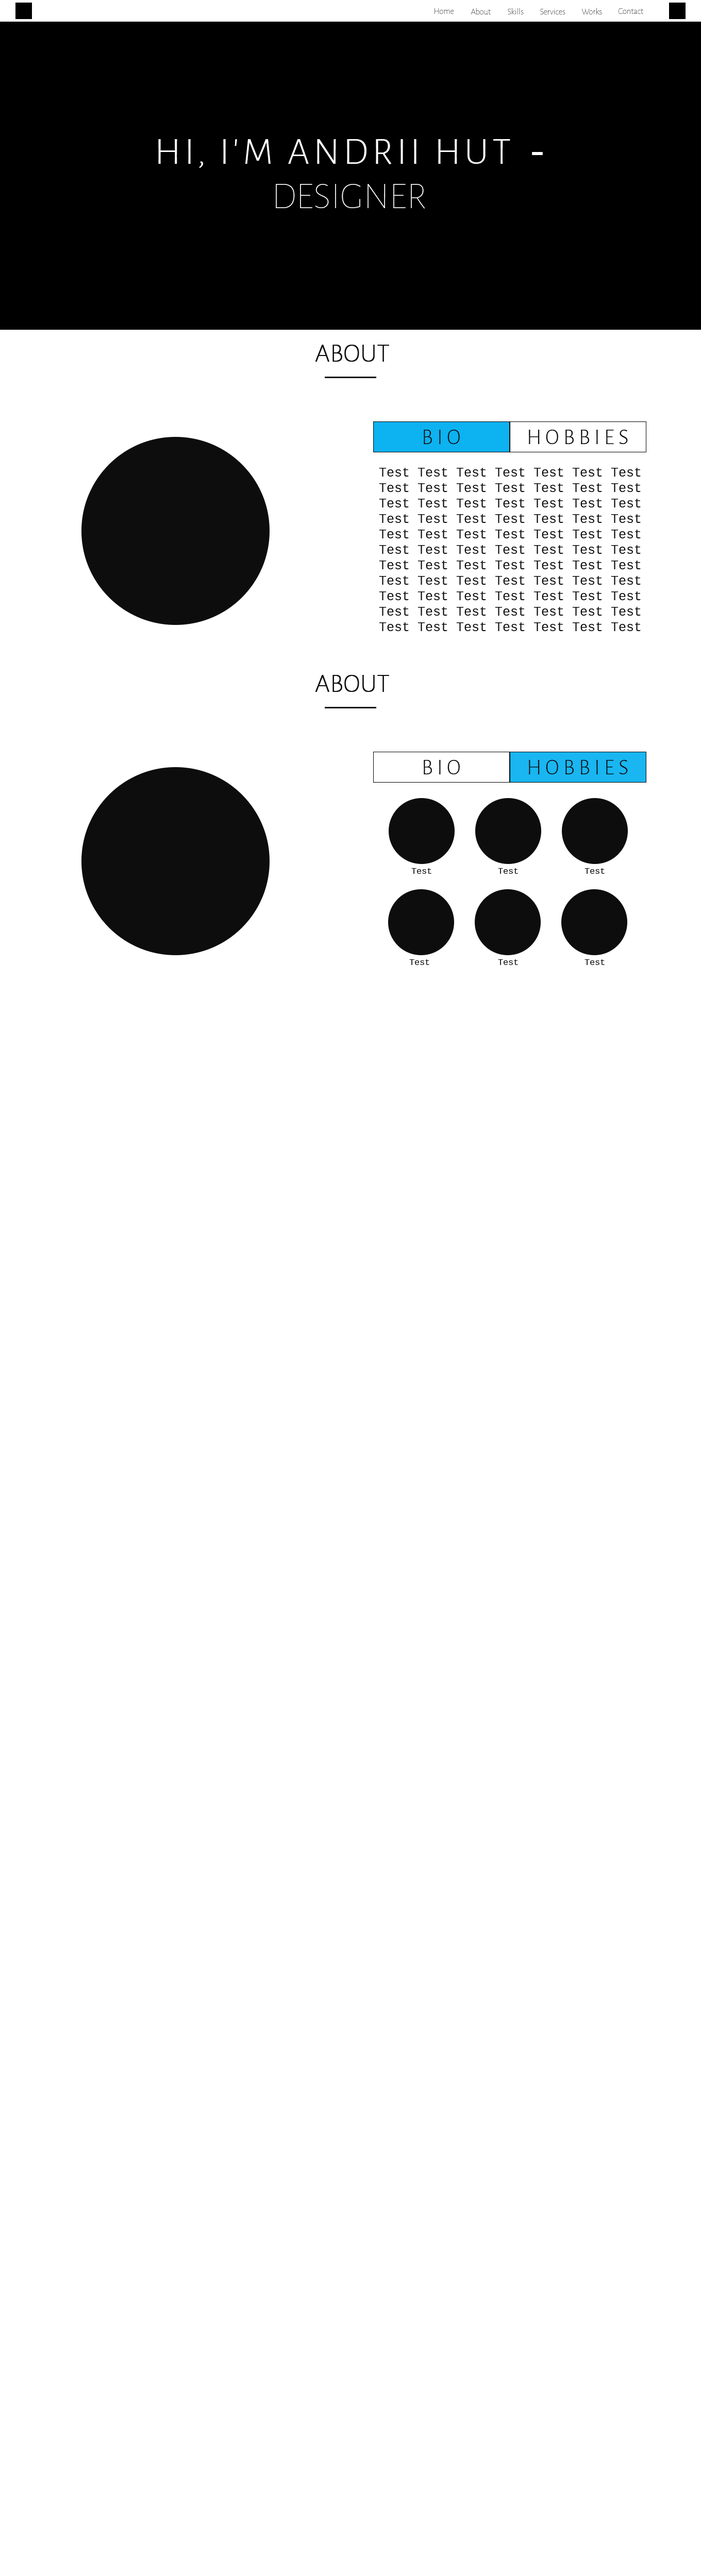
<style>
.page{position:relative;width:701px;height:2576px;background:#ffffff}
.page>*{position:absolute;margin:0}
.t1{font:8.6px "AlegreyaSans-Thin";color:#000000}
.t2{font:8.6px "AlegreyaSans-Thin"}
.t3{font:38.6px "AlegreyaSans-Light";letter-spacing:0.1em;color:#fffefe;text-transform:uppercase}
.t4{font:38.6px "Cousine";letter-spacing:0.1em;color:#fffefe;text-transform:uppercase}
.t5{font:38.6px "AlegreyaSans-Thin";color:#ffffff;text-transform:uppercase}
.t6{font:25.8px "AlegreyaSans-Thin";color:#010000;text-transform:uppercase;font-weight:bold}
.t7{font:21.5px "AlegreyaSans-Light";letter-spacing:0.2em;color:#000000}
.t8{font:12.9px "Cousine";color:#000000}
.t9{font:8.6px "Cousine";color:#000000}
</style>
<div class="page">
<p class="t1" style="left:434px;top:8px;width:20px;height:6px">Home</p>
<p class="t2" style="left:470px;top:8px;width:20px;height:6px">About</p>
<p class="t2" style="left:507px;top:8px;width:16px;height:6px">Skills</p>
<p class="t2" style="left:540px;top:9px;width:25px;height:5px">Services</p>
<p class="t1" style="left:581px;top:8px;width:21px;height:6px">Works</p>
<p class="t2" style="left:618px;top:8px;width:25px;height:6px">Contact</p>
<p class="t3" style="left:158px;top:139px;width:385px;height:29px">Hi, I'm Andrii Hut <span class="t4">-</span></p>
<p class="t5" style="left:276px;top:184px;width:149px;height:25px">Designer</p>
<p class="t6" style="left:315px;top:345px;width:74px;height:17px">About</p>
<p class="t7" style="left:423px;top:430px;width:37px;height:14px">BIO</p>
<p class="t7" style="left:529px;top:430px;width:99px;height:14px">HOBBIES</p>
<p class="t8" style="left:379px;top:468px;width:261px;height:163px">Test Test Test Test Test Test Test<br>Test Test Test Test Test Test Test<br>Test Test Test Test Test Test Test<br>Test Test Test Test Test Test Test<br>Test Test Test Test Test Test Test<br>Test Test Test Test Test Test Test<br>Test Test Test Test Test Test Test<br>Test Test Test Test Test Test Test<br>Test Test Test Test Test Test Test<br>Test Test Test Test Test Test Test<br>Test Test Test Test Test Test Test</p>
<p class="t6" style="left:315px;top:675px;width:74px;height:17px">About</p>
<p class="t7" style="left:423px;top:760px;width:37px;height:14px">BIO</p>
<p class="t7" style="left:529px;top:760px;width:99px;height:14px">HOBBIES</p>
<p class="t9" style="left:411px;top:868px;width:20px;height:6px">Test</p>
<p class="t9" style="left:498px;top:868px;width:20px;height:6px">Test</p>
<p class="t9" style="left:584px;top:868px;width:20px;height:6px">Test</p>
<p class="t9" style="left:409px;top:959px;width:20px;height:6px">Test</p>
<p class="t9" style="left:498px;top:959px;width:20px;height:6px">Test</p>
<p class="t9" style="left:584px;top:959px;width:20px;height:6px">Test</p>
</div>
